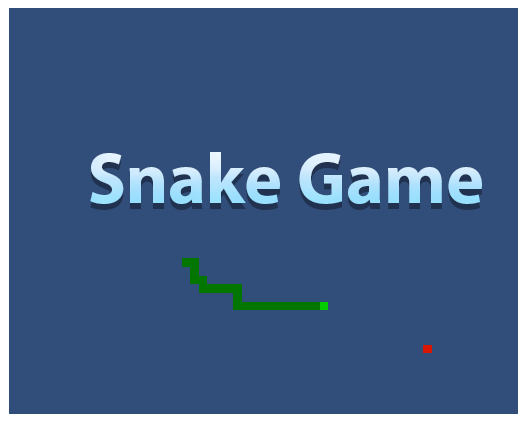
<style>
.page{position:relative;width:527px;height:422px;background:#314d79}
.page>*{position:absolute;margin:0}
.t1{font:72px "MyriadPro-Bold"}
</style>
<div class="page">
<p class="t1" style="left:90px;top:152px;width:392px;height:52px">Snake Game</p>
</div>
